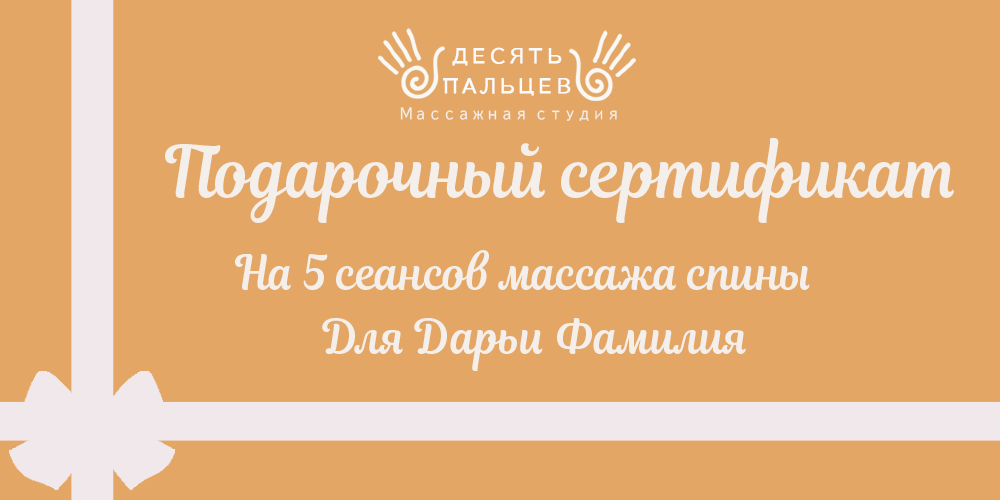
<style>
.page{position:relative;width:1000px;height:500px;background:#e3a665}
.page>*{position:absolute;margin:0}
.t1{font:19.4px "BIZUDPGothic-Regular";letter-spacing:-0.05em;color:#fafbfc;font-weight:bold}
.t2{font:14.5px "BIZUDPGothic-Regular";letter-spacing:0.1em;color:#f4efea;scale:0.9 1}
.t3{font:72px "Magnolia-Script";color:#f4efea;scale:0.9 1}
.t4{font:48px "Magnolia-Script";color:#f4efea;scale:0.9 1}
</style>
<div class="page">
<p class="t1" style="left:452px;top:47px;width:110px;height:19px">ДЕСЯТЬ</p>
<p class="t1" style="left:443px;top:77px;width:128px;height:19px">ПАЛЬЦЕВ</p>
<p class="t2" style="left:400px;top:107px;width:217px;height:14px">Массажная студия</p>
<p class="t3" style="left:165px;top:138px;width:789px;height:85px">Подарочный сертификат</p>
<p class="t4" style="left:235px;top:250px;width:575px;height:40px">На 5 сеансов массажа спины</p>
<p class="t4" style="left:322px;top:318px;width:424px;height:53px">Для Дарьи Фамилия</p>
</div>
